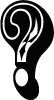
<style>
.page{position:relative;width:54px;height:100px;background:#ffffff}
.page>*{position:absolute;margin:0}
.t1{font:132px "RosewoodStd-Regular";letter-spacing:0.035em;color:#050404;scale:0.86 1}
</style>
<div class="page">
<p class="t1" style="left:0px;top:0px;width:54px;height:100px">?</p>
</div>
